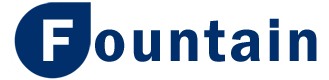
<style>
.page{position:relative;width:329px;height:80px;background:#ffffff}
.page>*{position:absolute;margin:0}
.t1{font:62.3px "FranklinGothic-Demi";letter-spacing:0.05em;color:#fefeff}
.t2{font:62.3px "FranklinGothic-Demi";letter-spacing:0.05em;color:#002f6c}
</style>
<div class="page">
<p class="t1" style="left:43px;top:19px;width:30px;height:42px">F</p>
<p class="t2" style="left:60px;top:18px;width:257px;height:44px">Fountain</p>
</div>
